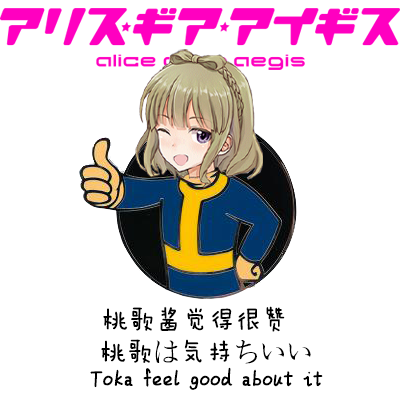
<style>
.page{position:relative;width:400px;height:400px;background:#ffffff}
.page>*{position:absolute;margin:0}
.t1{font:26.6px "FZMW--GB1-4";color:#000000}
</style>
<div class="page">
<p class="t1" style="left:103px;top:306px;width:182px;height:26px">桃歌酱觉得很赞</p>
<p class="t1" style="left:101px;top:339px;width:210px;height:25px">桃歌は気持ちいい</p>
<p class="t1" style="left:90px;top:367px;width:233px;height:23px">Toka feel good about it</p>
</div>
